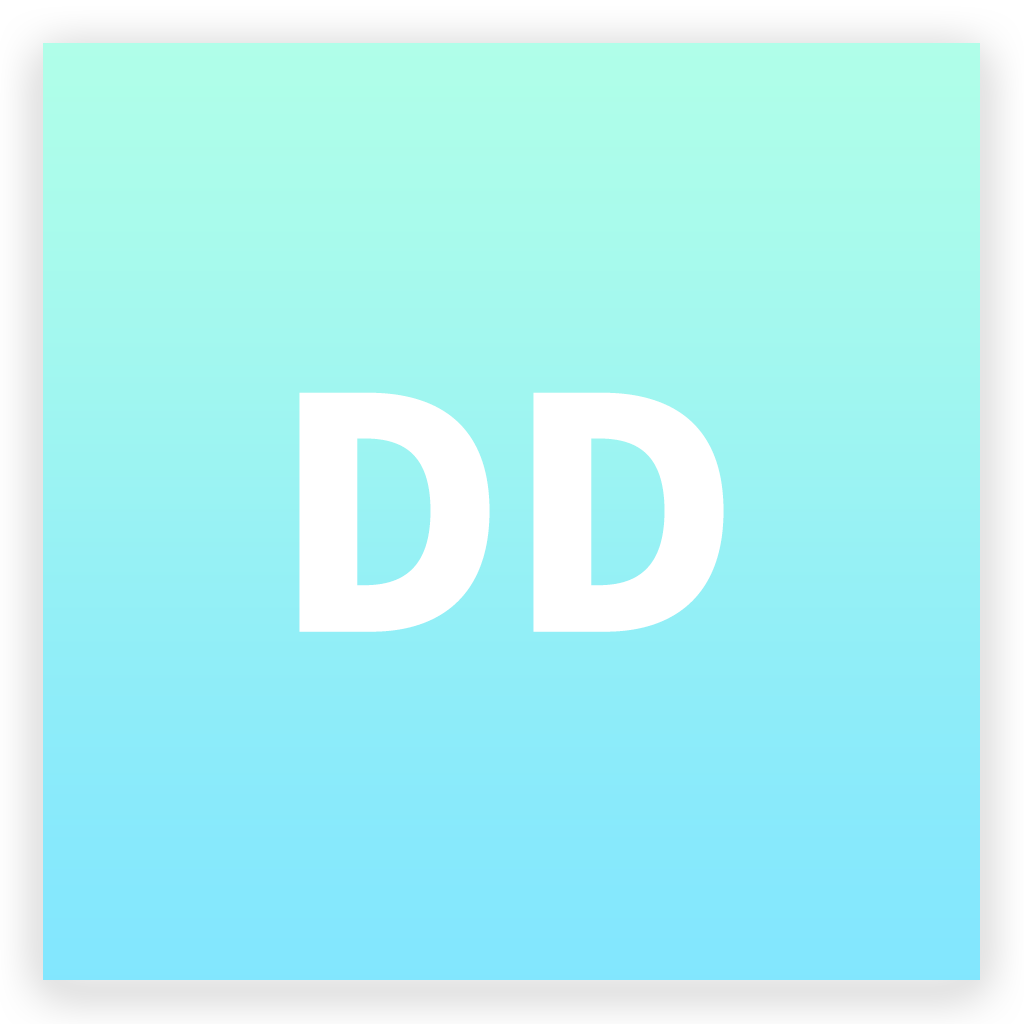
<style>
.page{position:relative;width:1024px;height:1024px}
.page>*{position:absolute;margin:0}
.t1{font:321px "NotoSansCJKjp-Black";color:#ffffff}
</style>
<div class="page">
<p class="t1" style="left:299px;top:392px;width:425px;height:240px">DD</p>
</div>
